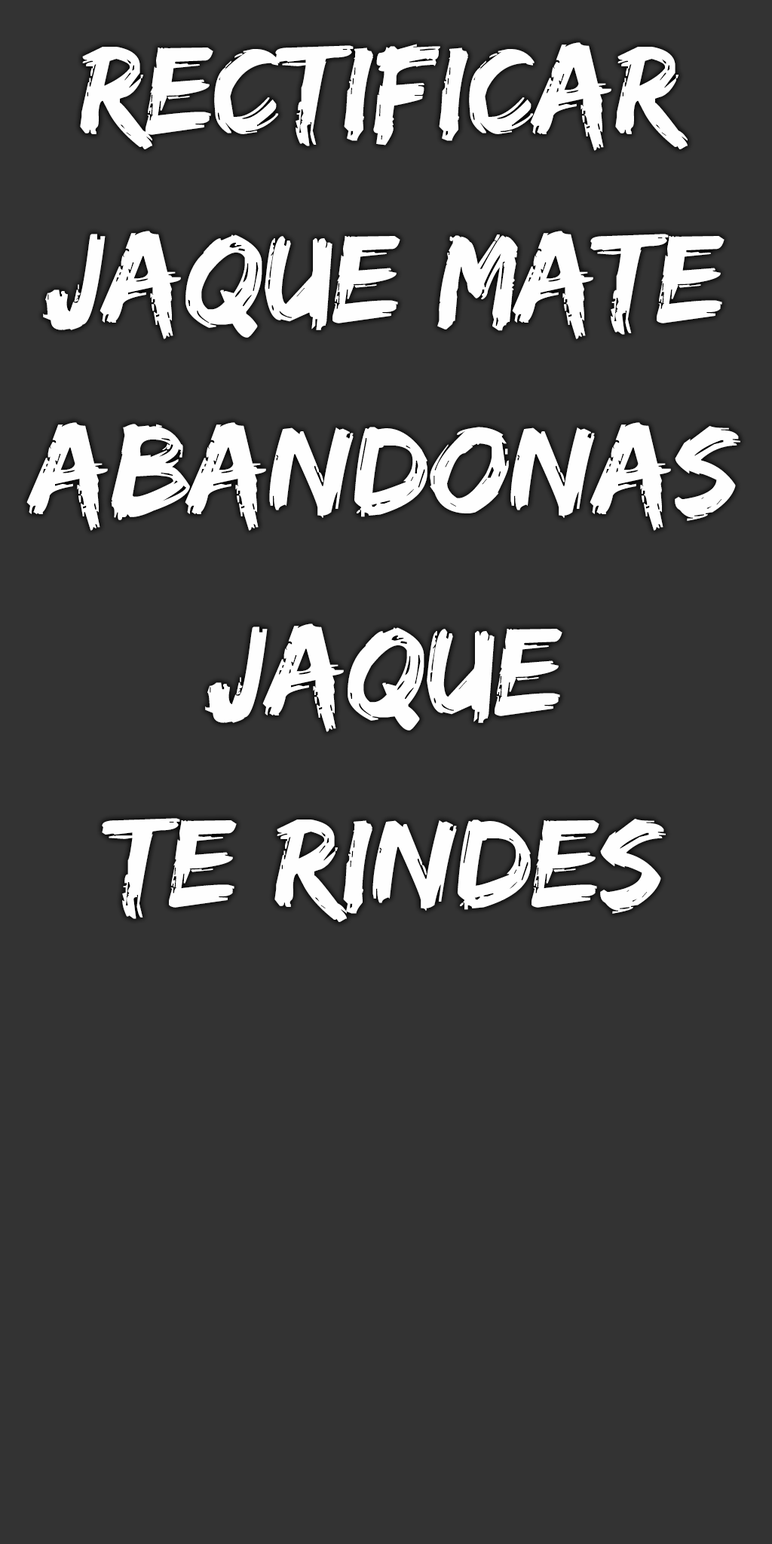
<style>
.page{position:relative;width:772px;height:1544px;background:#333333}
.page>*{position:absolute;margin:0}
.t1{font:129.7px "EdoSZ";color:#fefefe;scale:1.04 1}
</style>
<div class="page">
<p class="t1" style="left:80px;top:42px;width:608px;height:109px">RECTIFICAR</p>
<p class="t1" style="left:43px;top:231px;width:682px;height:108px">jaque mate</p>
<p class="t1" style="left:26px;top:422px;width:714px;height:109px">ABANDONAS</p>
<p class="t1" style="left:205px;top:624px;width:358px;height:108px">JAQUE</p>
<p class="t1" style="left:102px;top:818px;width:564px;height:104px">TE RINDES</p>
</div>
